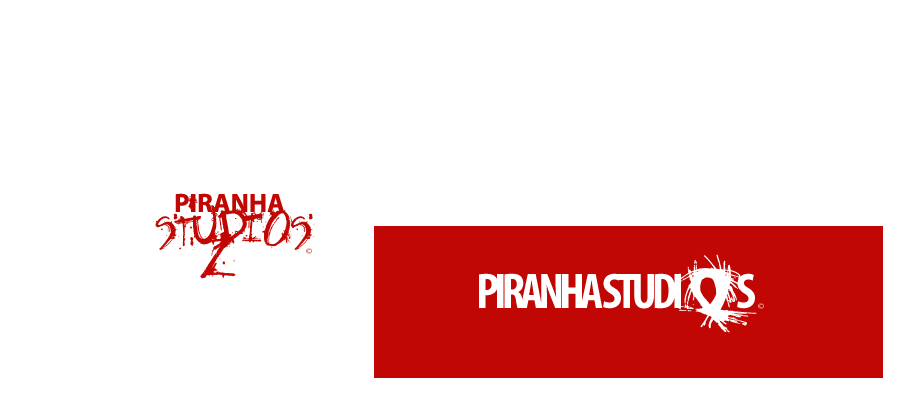
<style>
.page{position:relative;width:900px;height:400px;background:#ffffff}
.page>*{position:absolute;margin:0}
.t1{font:64px "Fh_Obscene";color:#c10703;font-variant:small-caps}
.t2{font:38px "MyriadPro-Bold";color:#c10703;font-variant:small-caps}
.t3{font:9px "MyriadPro-Regular"}
.t4{font:72px "el&fontgohtic!";color:#ffffff;scale:1.43 1}
.t5{font:72px "MyriadPro-BoldCond";letter-spacing:-0.1em;color:#ffffff;font-variant:small-caps}
</style>
<div class="page">
<p class="t1" style="left:155px;top:195px;width:160px;height:67px">studios</p>
<p class="t2" style="left:175px;top:193px;width:109px;height:19px">piranha</p>
<p class="t1" style="left:200px;top:232px;width:36px;height:47px">z</p>
<p class="t3" style="left:306px;top:248px;width:6px;height:6px">©</p>
<p class="t4" style="left:677px;top:254px;width:80px;height:79px">O</p>
<p class="t5" style="left:479px;top:273px;width:124px;height:35px">piranha</p>
<p class="t5" style="left:603px;top:273px;width:152px;height:36px">studi  s</p>
<p class="t3" style="left:758px;top:303px;width:6px;height:6px">©</p>
</div>
